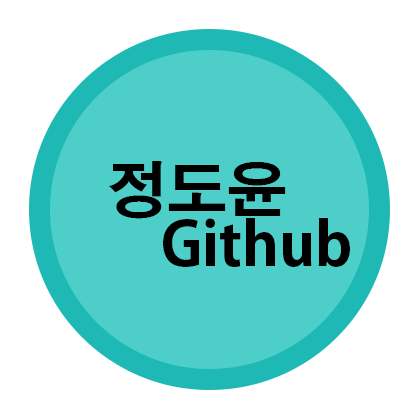
<style>
.page{position:relative;width:420px;height:420px;background:#ffffff}
.page>*{position:absolute;margin:0}
.t1{font:60px "H2gtrE";color:#000000}
.t2{font:60px "AdobeGothicStd-Bold";color:#000000}
</style>
<div class="page">
<p class="t1" style="left:109px;top:161px;width:177px;height:58px">정도윤</p>
<p class="t2" style="left:163px;top:218px;width:187px;height:49px">Github</p>
</div>
